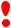
<style>
.page{position:relative;width:11px;height:28px;background:#ffffff}
.page>*{position:absolute;margin:0}
.t1{font:36px "CooperBlackStd";color:#ff0000}
</style>
<div class="page">
<p class="t1" style="left:1px;top:1px;width:9px;height:26px">!</p>
</div>
